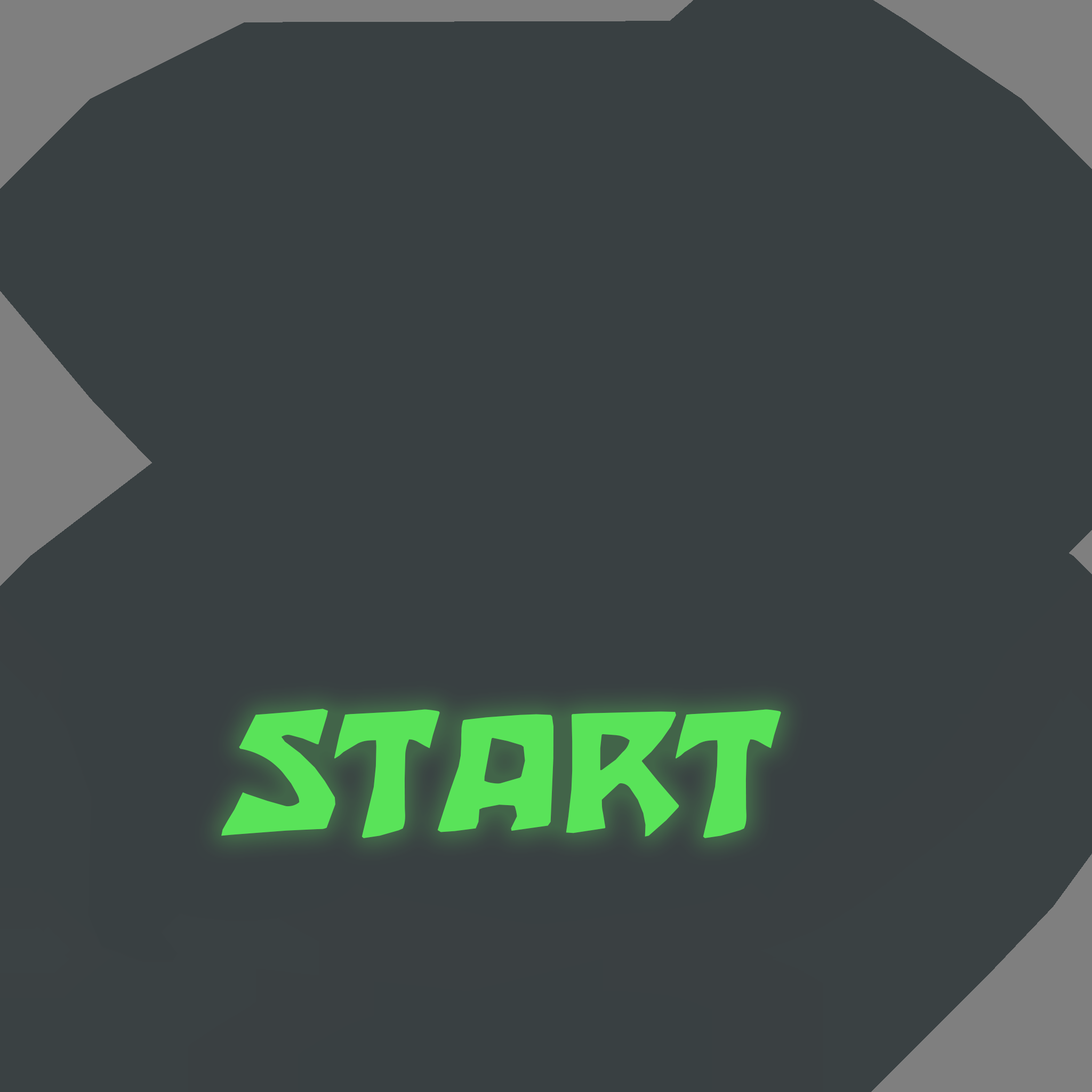
<style>
.page{position:relative;width:1092px;height:1092px;background:#394042}
.page>*{position:absolute;margin:0}
.t1{font:160px "Tarzan";color:#59e359}
</style>
<div class="page">
<p class="t1" style="left:221px;top:709px;width:560px;height:129px">START</p>
</div>
